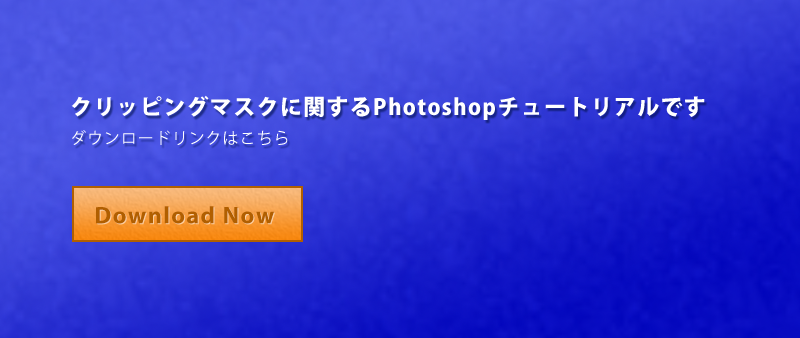
<style>
.page{position:relative;width:800px;height:338px}
.page>*{position:absolute;margin:0}
.t1{font:22px/19.2px "KozGoPr6N-Heavy";letter-spacing:0.06em;color:#ffffff}
.t2{font:16px/19.2px "KozGoPr6N-Regular";letter-spacing:0.06em;color:#ffffff}
.t3{font:24px "MyriadPro-Bold";letter-spacing:0.06em;color:#b15f00}
</style>
<div class="page">
<p class="t1" style="left:71px;top:95px;width:634px;height:50px">クリッピングマスクに関するPhotoshopチュートリアルです<br><span class="t2">ダウンロードリンクはこちら</span></p>
<p class="t3" style="left:96px;top:206px;width:178px;height:18px">Download Now</p>
</div>
